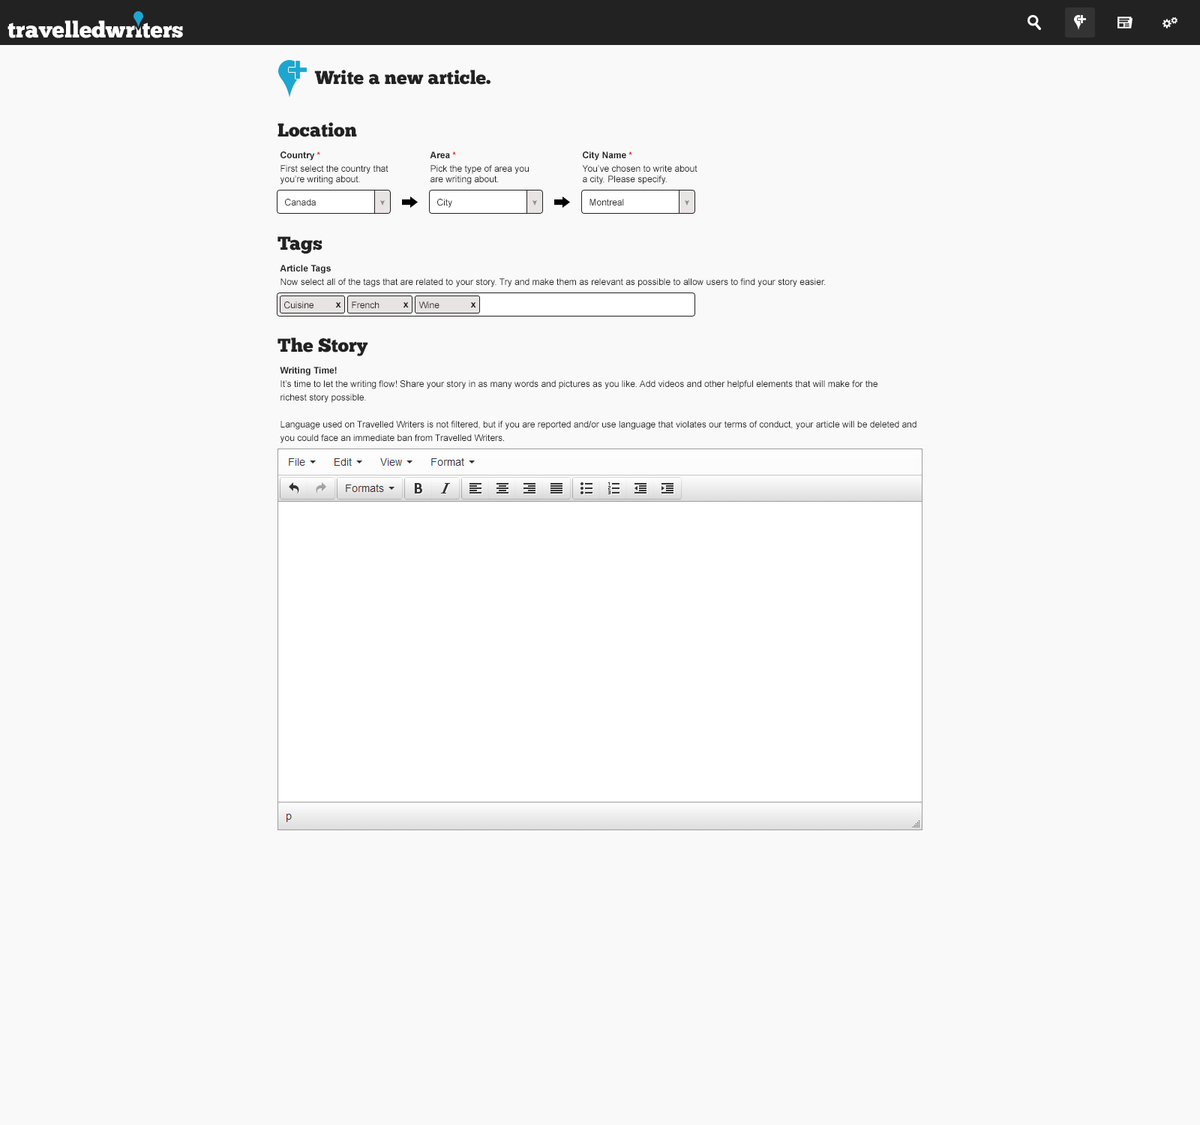
<style>
.page{position:relative;width:1200px;height:1125px;background:#f9f9f9}
.page>*{position:absolute;margin:0}
.t1{font:18.8px "ChunkFiveEx";color:#222222}
.t2{font:9px/13.5px "ArialMT";color:#222222}
.t3{font:9px/16.5px "Arial-BoldMT";color:#222222}
.t4{font:9px/16.5px "Arial-BoldMT";color:#ff0000}
.t5{font:9px "ArialMT";color:#222222}
.t6{font:9.8px "Arial-BoldMT";color:#222222}
</style>
<div class="page">
<p class="t1" style="left:314px;top:70px;width:176px;height:15px">Write a new article.</p>
<p class="t1" style="left:278px;top:122px;width:79px;height:15px">Location</p>
<p class="t2" style="left:280px;top:152px;width:108px;height:32px"><span class="t3">Country</span><span class="t4"> *<br></span>First select the country that <br><span class="t5">you’re writing about.</span></p>
<p class="t2" style="left:430px;top:152px;width:99px;height:32px"><span class="t3">Area </span><span class="t4">*<br></span>Pick the type of area you<br><span class="t5">are writing about.</span></p>
<p class="t2" style="left:582px;top:152px;width:116px;height:32px"><span class="t3">City Name </span><span class="t4">*<br></span>You’ve chosen to write about<br><span class="t5">a city. Please specify.</span></p>
<p class="t5" style="left:285px;top:199px;width:31px;height:7px">Canada</p>
<p class="t5" style="left:437px;top:199px;width:15px;height:9px">City</p>
<p class="t5" style="left:590px;top:199px;width:34px;height:7px">Montreal</p>
<p class="t1" style="left:278px;top:236px;width:44px;height:18px">Tags</p>
<p class="t2" style="left:280px;top:265px;width:546px;height:22px"><span class="t3">Article Tags<br></span>Now select all of the tags that are related to your story. Try and make them as relevant as possible to allow users to find your story easier.</p>
<p class="t5" style="left:284px;top:302px;width:30px;height:7px">Cuisine</p>
<p class="t6" style="left:335px;top:302px;width:6px;height:6px">x</p>
<p class="t5" style="left:352px;top:302px;width:28px;height:6px">French</p>
<p class="t6" style="left:403px;top:302px;width:6px;height:6px">x</p>
<p class="t5" style="left:418px;top:302px;width:22px;height:6px">Wine</p>
<p class="t6" style="left:470px;top:302px;width:6px;height:6px">x</p>
<p class="t1" style="left:278px;top:338px;width:90px;height:18px">The Story</p>
<p class="t2" style="left:280px;top:367px;width:636px;height:76px"><span class="t3">Writing Time!<br></span>It’s time to let the writing flow! Share your story in as many words and pictures as you like. Add videos and other helpful elements that will make for the<br>richest story possible. <br><br>Language used on Travelled Writers is not filtered, but if you are reported and/or use language that violates our terms of conduct, your article will be deleted and <br>you could face an immediate ban from Travelled Writers.</p>
</div>
